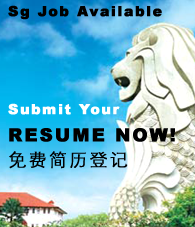
<style>
.page{position:relative;width:195px;height:227px}
.page>*{position:absolute;margin:0}
.t1{font:14px "Arial-Black";letter-spacing:0.1em;color:#000000;font-weight:bold}
.t2{font:14px "Arial-Black";letter-spacing:0.1em;color:#ffffff;font-weight:bold}
.t3{font:18px "Arial-Black";letter-spacing:0.1em;color:#000000;font-weight:bold}
.t4{font:18px "STXihei";letter-spacing:0.1em;color:#000000;font-weight:bold}
</style>
<div class="page">
<p class="t1" style="left:8px;top:5px;width:154px;height:15px">Sg Job Available</p>
<p class="t2" style="left:8px;top:103px;width:167px;height:39px">Submit Your<br><span class="t3">RESUME NOW!</span></p>
<p class="t4" style="left:9px;top:151px;width:119px;height:18px">免费简历登记</p>
</div>
